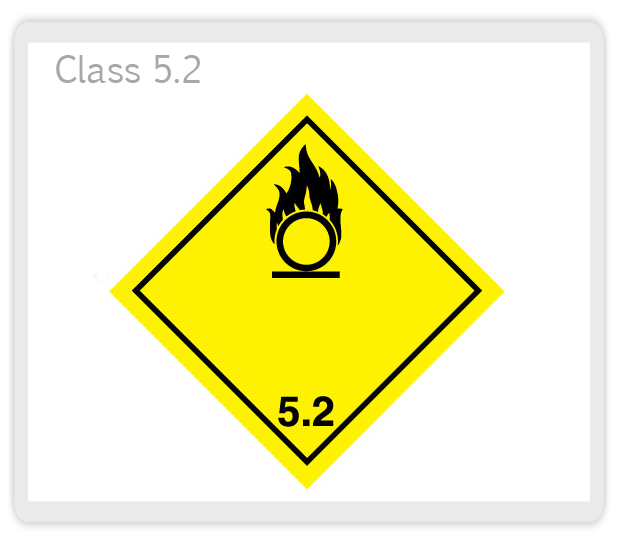
<style>
.page{position:relative;width:618px;height:544px;background:#ffffff}
.page>*{position:absolute;margin:0}
.t1{font:36px "EuphemiaCAS";color:#aca7a7}
</style>
<div class="page">
<p class="t1" style="left:56px;top:55px;width:144px;height:28px">Class 5.2</p>
</div>
